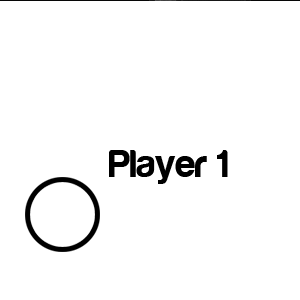
<style>
.page{position:relative;width:300px;height:300px;background:#ffffff}
.page>*{position:absolute;margin:0}
.t1{font:40px "Harabara";color:#000000}
</style>
<div class="page">
<p class="t1" style="left:109px;top:149px;width:119px;height:34px">Player 1</p>
</div>
